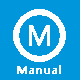
<style>
.page{position:relative;width:80px;height:80px;background:#0096dc}
.page>*{position:absolute;margin:0}
.t1{font:26.7px "MicrosoftYaHei";color:#fdfefe;font-weight:bold}
.t2{font:11.1px "MicrosoftYaHei";color:#fdfefe;font-weight:bold}
</style>
<div class="page">
<p class="t1" style="left:29px;top:25px;width:21px;height:21px">M</p>
<p class="t2" style="left:17px;top:65px;width:44px;height:9px">Manual</p>
</div>
